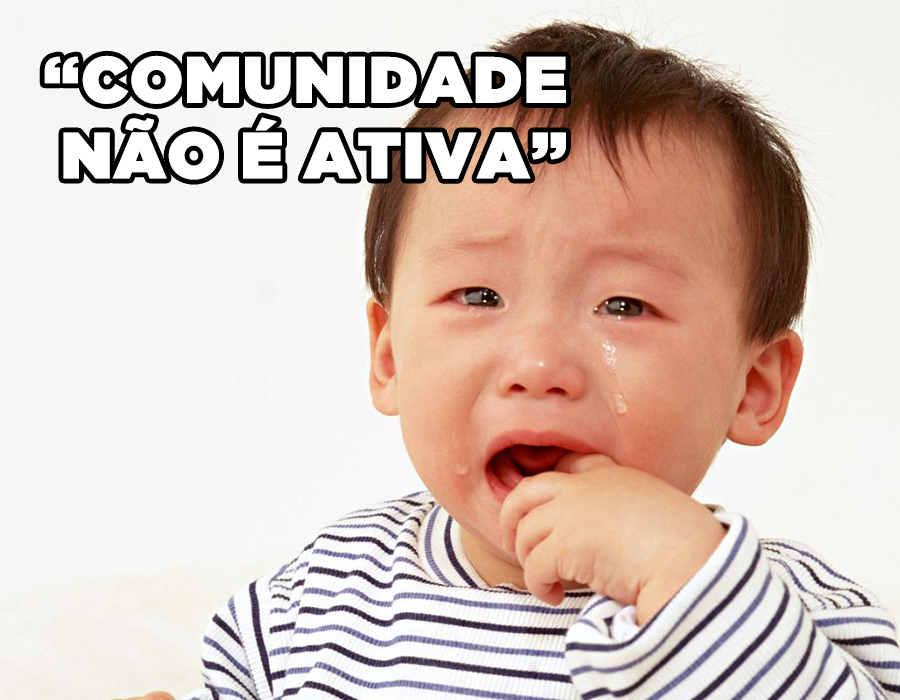
<style>
.page{position:relative;width:900px;height:700px}
.page>*{position:absolute;margin:0}
.t1{font:65px/75.7px "GothamUltra";color:#ffffff;font-weight:bold}
</style>
<div class="page">
<p class="t1" style="left:44px;top:55px;width:522px;height:125px;text-align:right">“COMUNIDADE<br>NÃO É ATIVA”</p>
</div>
